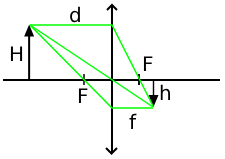
<style>
.page{position:relative;width:225px;height:159px;background:#ffffff}
.page>*{position:absolute;margin:0}
.t1{font:20px "DejaVuSans";color:#000000}
</style>
<div class="page">
<p class="t1" style="left:70px;top:6px;width:10px;height:17px">d</p>
<p class="t1" style="left:10px;top:46px;width:13px;height:15px">H</p>
<p class="t1" style="left:143px;top:56px;width:10px;height:15px">F</p>
<p class="t1" style="left:78px;top:88px;width:10px;height:15px">F</p>
<p class="t1" style="left:160px;top:84px;width:10px;height:16px">h</p>
<p class="t1" style="left:129px;top:113px;width:8px;height:16px">f</p>
</div>
